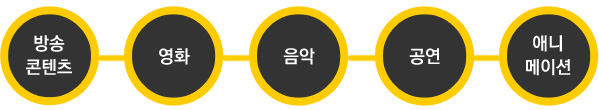
<style>
.page{position:relative;width:599px;height:110px;background:#ffffff}
.page>*{position:absolute;margin:0}
.t1{font:18px/23.8px "KoPubDotumBold";color:#ffffff}
.t2{font:18px "KoPubDotumBold";color:#ffffff}
</style>
<div class="page">
<p class="t1" style="left:26px;top:35px;width:46px;height:40px;text-align:center">방송<br>콘텐츠</p>
<p class="t1" style="left:526px;top:35px;width:45px;height:41px;text-align:center">애니<br>메이션</p>
<p class="t2" style="left:159px;top:48px;width:31px;height:17px">영화</p>
<p class="t2" style="left:283px;top:48px;width:32px;height:17px">음악</p>
<p class="t2" style="left:409px;top:48px;width:31px;height:17px">공연</p>
</div>
